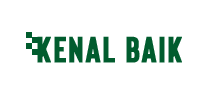
<style>
.page{position:relative;width:200px;height:100px;background:#ffffff}
.page>*{position:absolute;margin:0}
.t1{font:36px "Bison-Bold";color:#015c2e;font-weight:bold}
</style>
<div class="page">
<p class="t1" style="left:37px;top:36px;width:145px;height:27px">Kenal BAIK</p>
</div>
